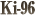
<style>
.page{position:relative;width:36px;height:16px;background:#ffffff}
.page>*{position:absolute;margin:0}
.t1{font:17px "RyuminPro-ExBold";letter-spacing:-0.08em;color:#4a3f32;font-weight:bold;scale:0.9 1}
</style>
<div class="page">
<p class="t1" style="left:0px;top:1px;width:35px;height:14px">Ki-96</p>
</div>
